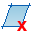
<style>
.page{position:relative;width:32px;height:32px;background:#ffffff}
.page>*{position:absolute;margin:0}
.t1{font:14px "HelveticaNeueLTW1G-Hv";color:#ff0000}
</style>
<div class="page">
<p class="t1" style="left:17px;top:21px;width:10px;height:10px">X</p>
</div>
